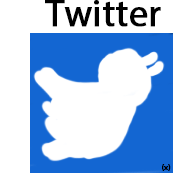
<style>
.page{position:relative;width:179px;height:179px;background:#ffffff}
.page>*{position:absolute;margin:0}
.t1{font:37.5px "MyriadPro-Regular";color:#000000;font-weight:bold}
.t2{font:8.3px "MyriadPro-Regular";color:#000000;font-weight:bold}
</style>
<div class="page">
<p class="t1" style="left:45px;top:0px;width:116px;height:27px">Twitter</p>
<p class="t2" style="left:162px;top:164px;width:9px;height:7px">(x)</p>
</div>
